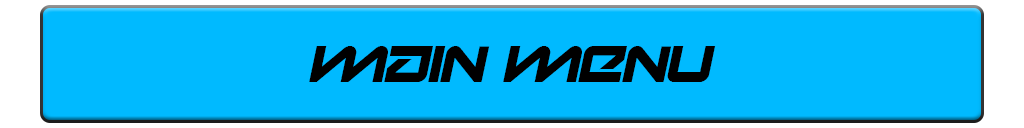
<style>
.page{position:relative;width:1024px;height:128px;background:#00baff}
.page>*{position:absolute;margin:0}
.t1{font:12px "Onky-Italic";color:#000000}
</style>
<div class="page">
<p class="t1" style="left:309px;top:46px;width:407px;height:36px">Main Menu</p>
</div>
